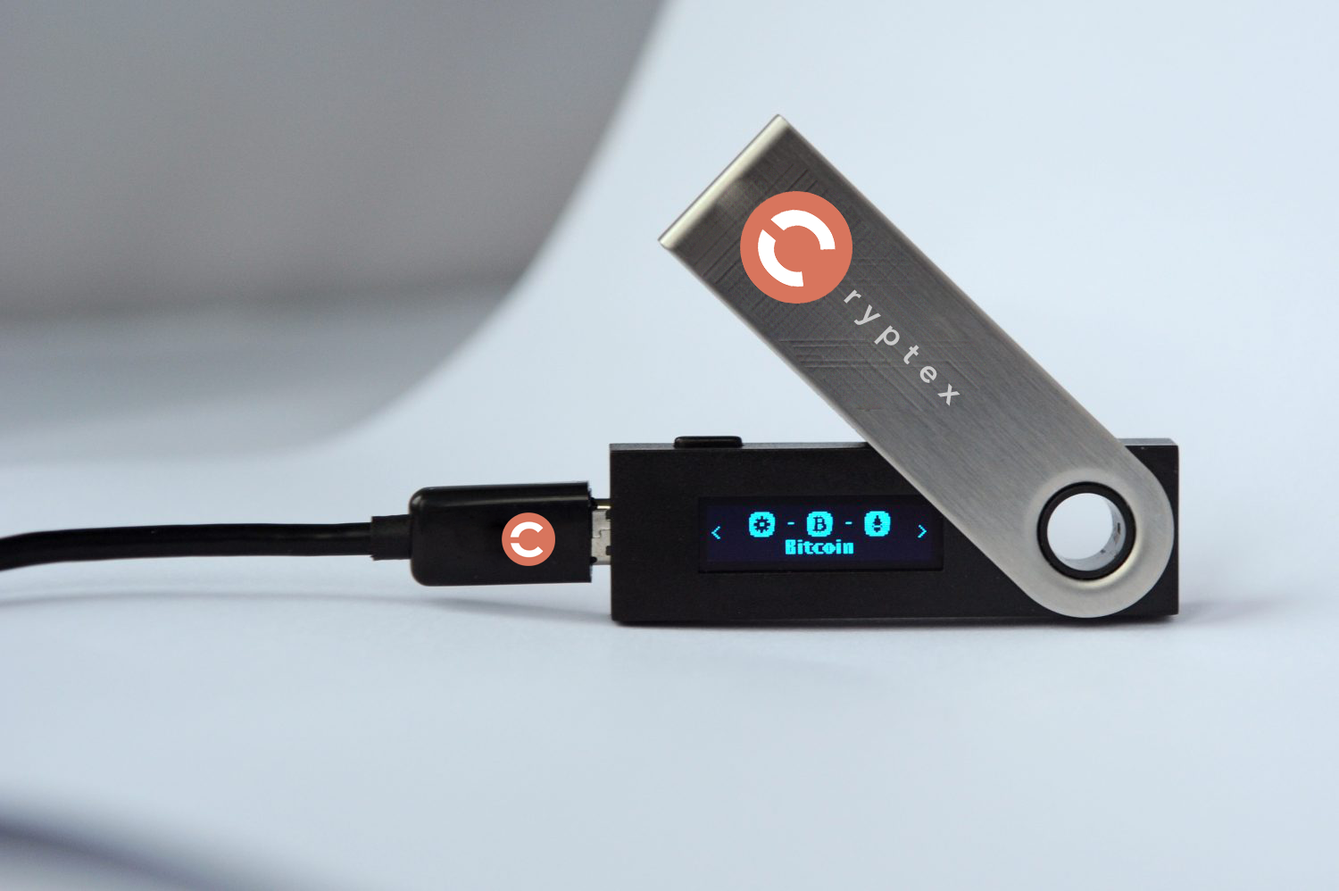
<style>
.page{position:relative;width:1339px;height:891px}
.page>*{position:absolute;margin:0}
.t1{font:32.1px "AvenirNext-DemiBold";letter-spacing:0.05em;color:#c9c9c9}
</style>
<div class="page">
<p class="t1" style="left:843px;top:289px;width:117px;height:117px;rotate:45deg">r y p t e x</p>
</div>
